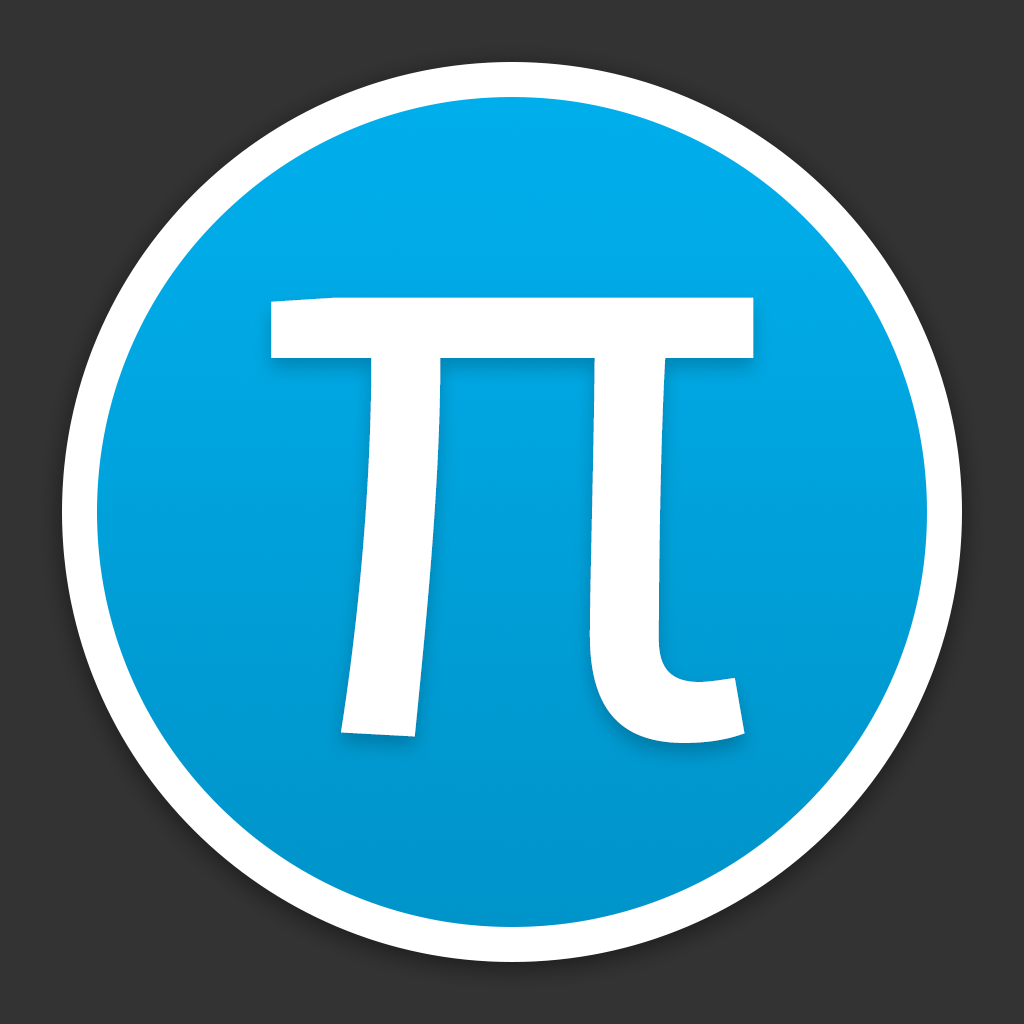
<style>
.page{position:relative;width:1024px;height:1024px;background:#333333}
.page>*{position:absolute;margin:0}
.t1{font:800px "NotoSansCJKsc-Regular";color:#ffffff}
</style>
<div class="page">
<p class="t1" style="left:271px;top:297px;width:483px;height:446px">π</p>
</div>
